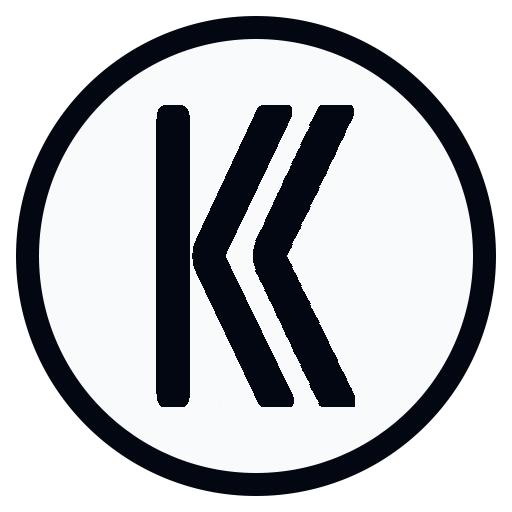
<style>
.page{position:relative;width:512px;height:512px;background:#f9fafb}
.page>*{position:absolute;margin:0}
.t1{font:759.9px "Mitr-Regular";letter-spacing:0.02em;color:#030712;scale:0.57 1}
</style>
<div class="page">
<p class="t1" style="left:156px;top:105px;width:138px;height:302px">K</p>
</div>
